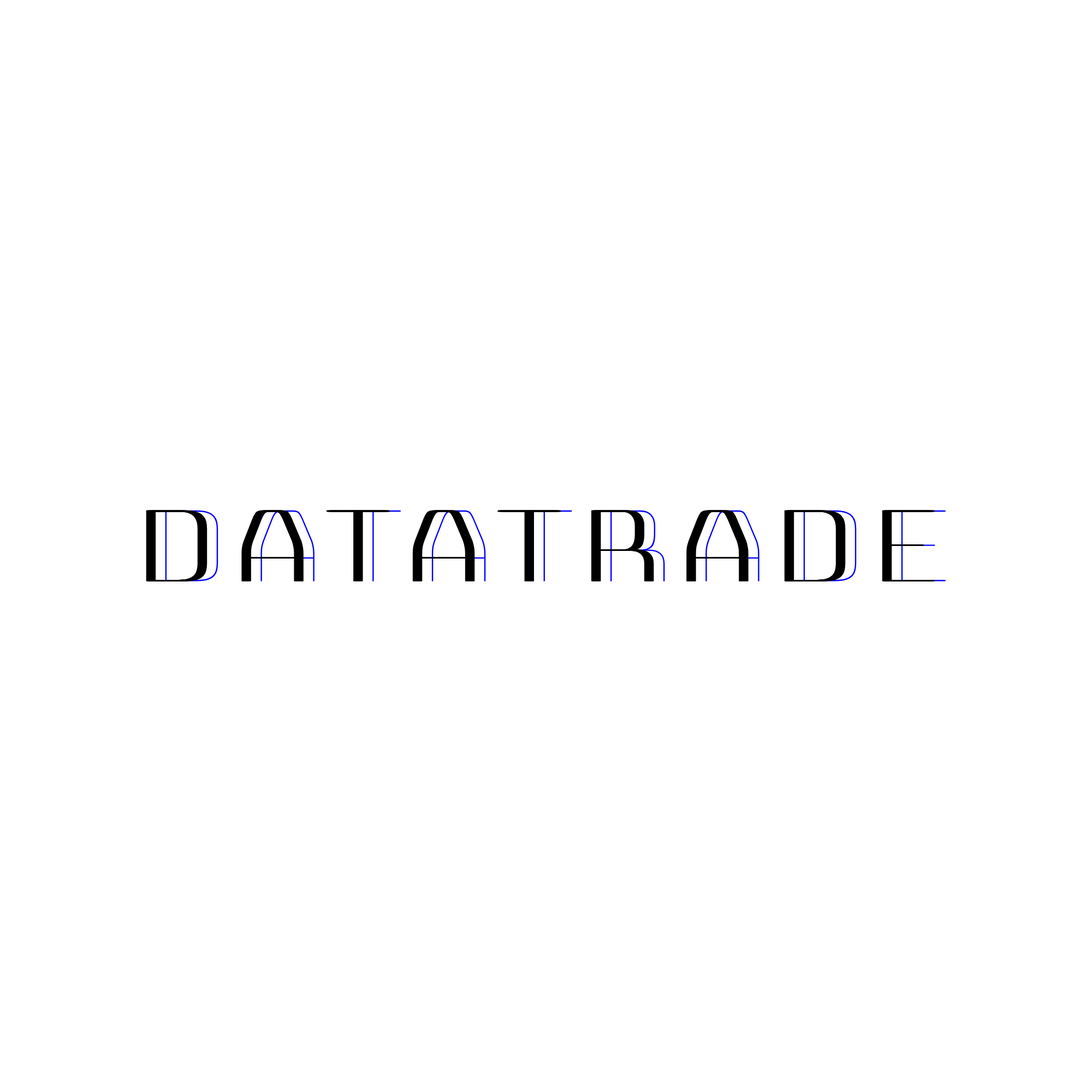
<style>
.page{position:relative;width:1092px;height:1092px;background:#ffffff}
.page>*{position:absolute;margin:0}
.t1{font:131px "BungeeHairline-Regular";color:#000000}
.t2{font:131px "BungeeHairline-Regular"}
</style>
<div class="page">
<p class="t1" style="left:146px;top:510px;width:781px;height:71px">DATATRADE</p>
<p class="t1" style="left:146px;top:510px;width:781px;height:71px">DATATRADE</p>
<p class="t1" style="left:147px;top:510px;width:781px;height:71px">DATATRADE</p>
<p class="t1" style="left:147px;top:510px;width:781px;height:71px">DATATRADE</p>
<p class="t1" style="left:148px;top:510px;width:781px;height:71px">DATATRADE</p>
<p class="t1" style="left:149px;top:510px;width:780px;height:71px">DATATRADE</p>
<p class="t1" style="left:149px;top:510px;width:781px;height:71px">DATATRADE</p>
<p class="t1" style="left:150px;top:510px;width:780px;height:71px">DATATRADE</p>
<p class="t1" style="left:150px;top:510px;width:781px;height:71px">DATATRADE</p>
<p class="t1" style="left:151px;top:510px;width:780px;height:71px">DATATRADE</p>
<p class="t1" style="left:151px;top:510px;width:781px;height:71px">DATATRADE</p>
<p class="t1" style="left:152px;top:510px;width:781px;height:71px">DATATRADE</p>
<p class="t1" style="left:152px;top:510px;width:781px;height:71px">DATATRADE</p>
<p class="t1" style="left:153px;top:510px;width:781px;height:71px">DATATRADE</p>
<p class="t1" style="left:153px;top:510px;width:781px;height:71px">DATATRADE</p>
<p class="t1" style="left:154px;top:510px;width:781px;height:71px">DATATRADE</p>
<p class="t2" style="left:165px;top:510px;width:781px;height:71px">DATATRADE</p>
</div>
